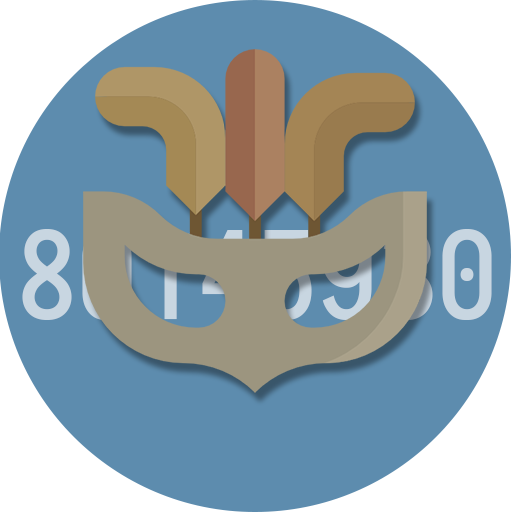
<style>
.page{position:relative;width:512px;height:512px;background:#5d8cae}
.page>*{position:absolute;margin:0}
.t1{font:120px "Iosevka-Medium"}
</style>
<div class="page">
<p class="t1" style="left:22px;top:229px;width:470px;height:91px">80145930</p>
</div>
